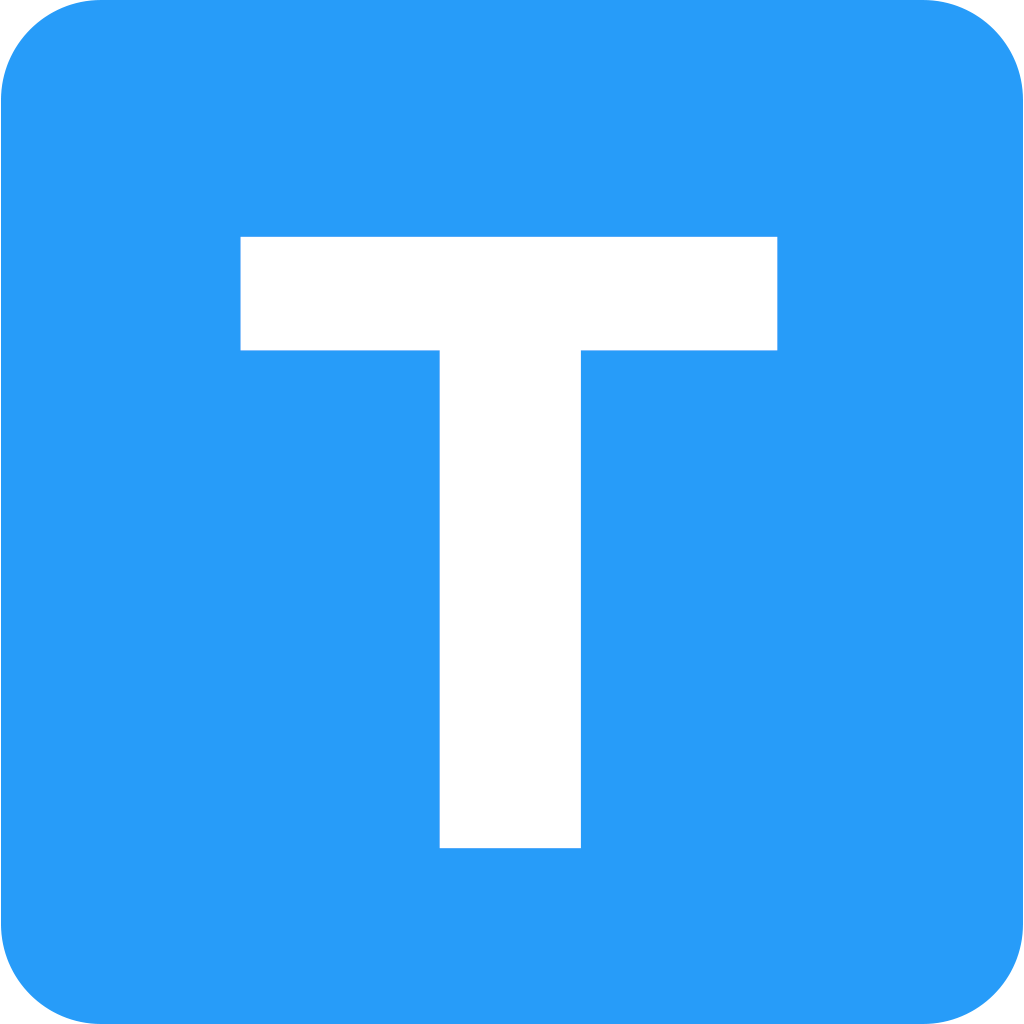
<style>
.page{position:relative;width:1024px;height:1024px;background:#279cf9}
.page>*{position:absolute;margin:0}
.t1{font:708.3px "FZLTTHK--GBK1-0";letter-spacing:0.075em;color:#ffffff}
</style>
<div class="page">
<p class="t1" style="left:240px;top:236px;width:538px;height:613px">T</p>
</div>
